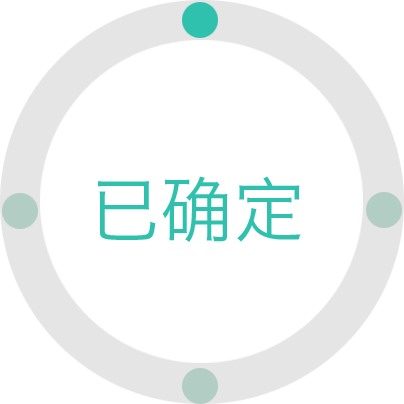
<style>
.page{position:relative;width:404px;height:404px;background:#ffffff}
.page>*{position:absolute;margin:0}
.t1{font:72px "HiraginoSansGB-W3";color:#30c1ae}
</style>
<div class="page">
<p class="t1" style="left:98px;top:176px;width:203px;height:66px">已确定</p>
</div>
